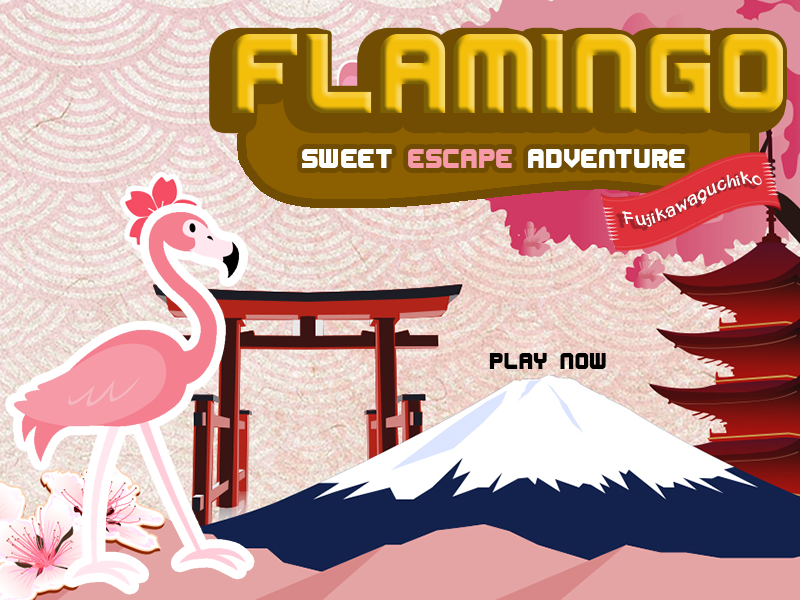
<style>
.page{position:relative;width:800px;height:600px}
.page>*{position:absolute;margin:0}
.t1{font:150px "PL-EDIT"}
.t2{font:36px "PL-EDIT";color:#fffffe}
.t3{font:36px "PL-EDIT";color:#f69aa7}
.t4{font:30px "NPNaipolTemplate";color:#ffffff}
.t5{font:30px "PL-EDIT";color:#000000}
</style>
<div class="page">
<p class="t1" style="left:232px;top:34px;width:551px;height:79px">Flamingo</p>
<p class="t2" style="left:302px;top:149px;width:383px;height:19px">sweet <span class="t3">escape</span> adventure</p>
<p class="t4" style="left:622px;top:171px;width:140px;height:56px;rotate:-15deg">Fujikawaguchiko</p>
<p class="t5" style="left:489px;top:353px;width:117px;height:16px">PLAY now</p>
</div>
